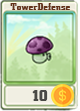
<style>
.page{position:relative;width:80px;height:111px}
.page>*{position:absolute;margin:0}
.t1{font:10.2px "UVNThanhPhoNang";color:#633219}
.t2{font:16.7px "UVNThanhPhoNang";color:#494945}
</style>
<div class="page">
<p class="t1" style="left:10px;top:3px;width:60px;height:7px">TowerDefense</p>
<p class="t2" style="left:32px;top:90px;width:16px;height:11px">10</p>
</div>
